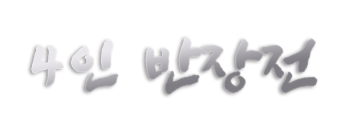
<style>
.page{position:relative;width:360px;height:120px;background:#ffffff}
.page>*{position:absolute;margin:0}
.t1{font:65.6px "SangSangRockOTF";letter-spacing:0.12em}
.t2{font:65.6px "SangSangRockOTF";letter-spacing:-0.02em}
</style>
<div class="page">
<p class="t1" style="left:32px;top:37px;width:285px;height:57px">4인 <span class="t2">반장</span>전</p>
</div>
